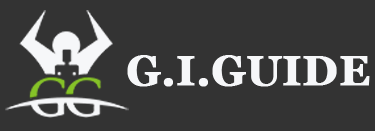
<style>
.page{position:relative;width:375px;height:131px;background:#333333}
.page>*{position:absolute;margin:0}
.t1{font:42.2px "Georgia-Bold";color:#f6f7f9;font-weight:bold}
</style>
<div class="page">
<p class="t1" style="left:127px;top:55px;width:243px;height:32px">G.I.GUIDE</p>
</div>
